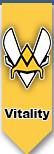
<style>
.page{position:relative;width:54px;height:154px;background:#fdcc46}
.page>*{position:absolute;margin:0}
.t1{font:11.7px "Arial-Black";letter-spacing:-0.01em;color:#000000}
</style>
<div class="page">
<p class="t1" style="left:4px;top:109px;width:46px;height:11px">Vitality</p>
</div>
